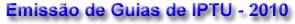
<style>
.page{position:relative;width:295px;height:24px;background:#ffffff}
.page>*{position:absolute;margin:0}
.t1{font:18px "Arial-BoldMT"}
</style>
<div class="page">
<p class="t1" style="left:6px;top:2px;width:282px;height:15px">Emissão de Guias de IPTU - 2010</p>
</div>
